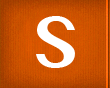
<style>
.page{position:relative;width:110px;height:88px}
.page>*{position:absolute;margin:0}
.t1{font:72px "MyanmarMN-Bold";color:#ffffff}
</style>
<div class="page">
<p class="t1" style="left:36px;top:16px;width:39px;height:52px">S</p>
</div>
